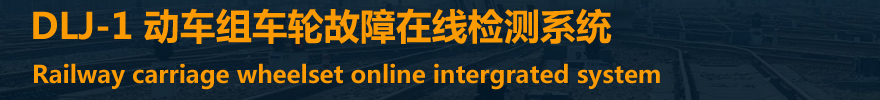
<style>
.page{position:relative;width:880px;height:100px}
.page>*{position:absolute;margin:0}
.t1{font:36px "MicrosoftYaHei-Bold";color:#fc9a01}
.t2{font:24px "MicrosoftYaHei-Bold";color:#fc9a01}
</style>
<div class="page">
<p class="t1" style="left:33px;top:8px;width:579px;height:36px">DLJ-1 动车组车轮故障在线检测系统</p>
<p class="t2" style="left:34px;top:63px;width:626px;height:27px">Railway carriage wheelset online intergrated system</p>
</div>
